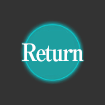
<style>
.page{position:relative;width:105px;height:105px;background:#333333}
.page>*{position:absolute;margin:0}
.t1{font:24px "RyuminPro-ExBold";letter-spacing:-0.08em;color:#fefefe;scale:0.9 1}
</style>
<div class="page">
<p class="t1" style="left:22px;top:43px;width:62px;height:19px">Return</p>
</div>
